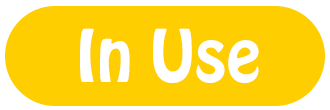
<style>
.page{position:relative;width:330px;height:110px;background:#ffce00}
.page>*{position:absolute;margin:0}
.t1{font:64px "HoboStd";color:#ffffff}
</style>
<div class="page">
<p class="t1" style="left:80px;top:28px;width:179px;height:55px">In Use</p>
</div>
